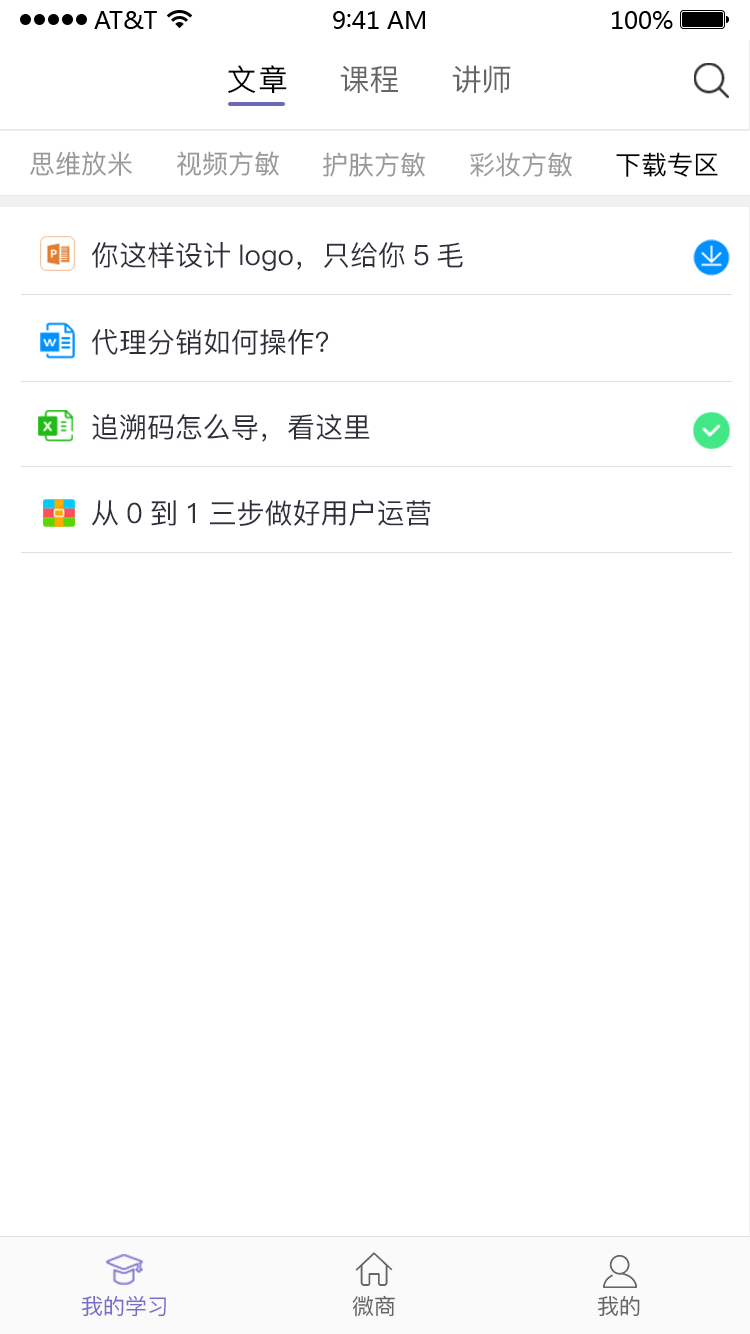
<style>
.page{position:relative;width:750px;height:1334px;background:#ffffff}
.page>*{position:absolute;margin:0}
.t1{font:30px "PingFang-SC-Medium";letter-spacing:0.04em;color:#000000}
.t2{font:30px "PingFang-SC-Medium";color:#666666}
.t3{font:26px "PingFang-SC-Medium";color:#999999}
.t4{font:26px "PingFang-SC-Medium";color:#000000}
.t5{font:28px "PingFang-SC-Medium";color:#2e313a}
.t6{font:22px "PingFang-SC-Medium";color:#786ec8}
.t7{font:22px "PingFang-SC-Medium";color:#666666}
</style>
<div class="page">
<p class="t1" style="left:228px;top:65px;width:59px;height:28px">文章</p>
<p class="t2" style="left:340px;top:65px;width:58px;height:28px">课程</p>
<p class="t2" style="left:452px;top:65px;width:59px;height:28px">讲师</p>
<p class="t3" style="left:30px;top:151px;width:102px;height:25px">思维放米</p>
<p class="t3" style="left:177px;top:151px;width:102px;height:25px">视频方敏</p>
<p class="t3" style="left:323px;top:152px;width:102px;height:25px">护肤方敏</p>
<p class="t3" style="left:470px;top:152px;width:102px;height:25px">彩妆方敏</p>
<p class="t4" style="left:616px;top:152px;width:102px;height:25px">下载专区</p>
<p class="t5" style="left:92px;top:242px;width:371px;height:29px">你这样设计logo，只给你5毛</p>
<p class="t5" style="left:92px;top:329px;width:237px;height:26px">代理分销如何操作？</p>
<p class="t5" style="left:92px;top:414px;width:278px;height:28px">追溯码怎么导，看这里</p>
<p class="t5" style="left:92px;top:499px;width:339px;height:27px">从0到1三步做好用户运营</p>
<p class="t6" style="left:81px;top:1295px;width:85px;height:22px">我的学习</p>
<p class="t7" style="left:352px;top:1295px;width:43px;height:22px">微商</p>
<p class="t7" style="left:597px;top:1295px;width:43px;height:22px">我的</p>
</div>
